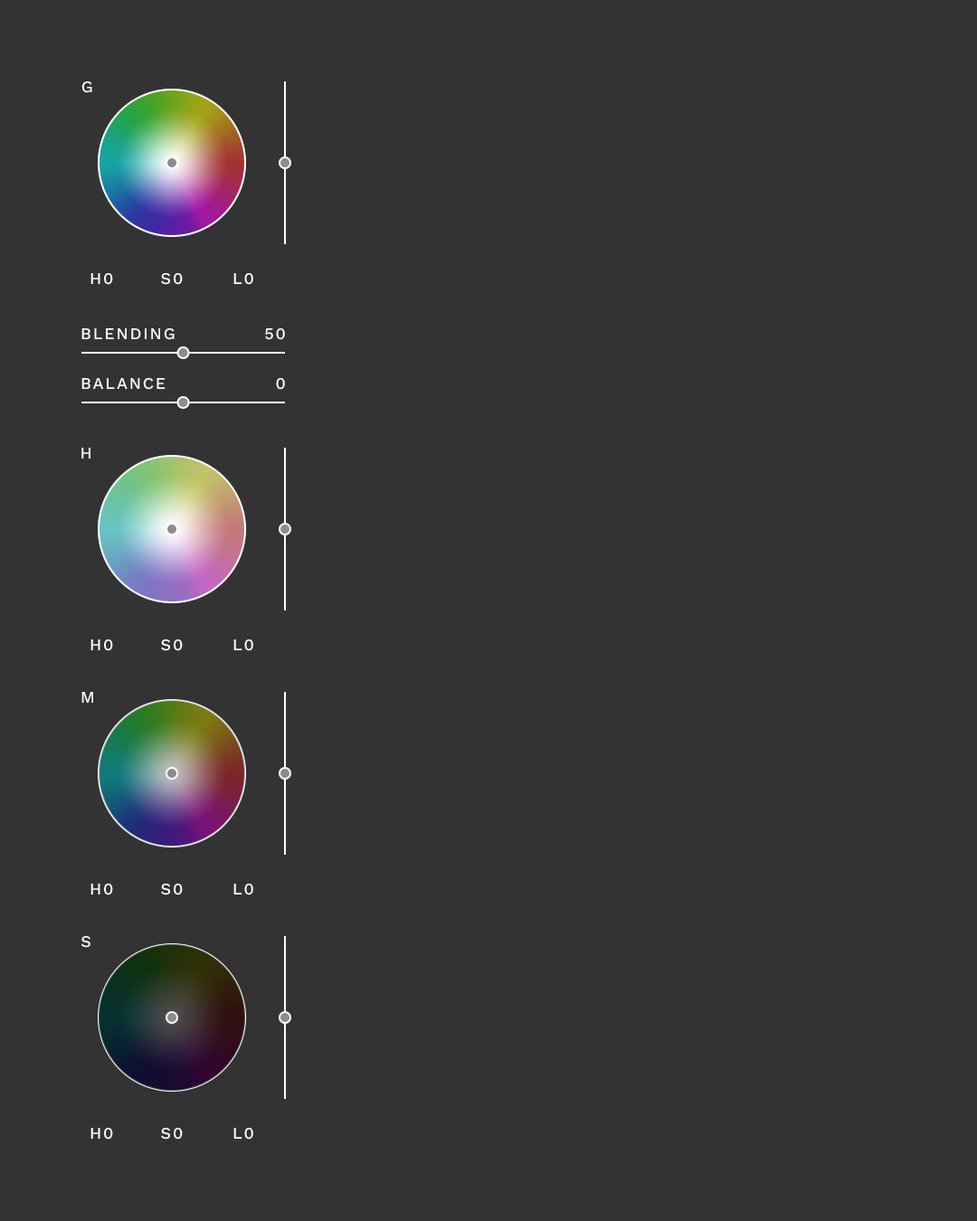
<style>
.page{position:relative;width:977px;height:1221px;background:#333333}
.page>*{position:absolute;margin:0}
.t1{font:16.3px "WorkSansRoman-Medium";letter-spacing:0.1em;color:#ffffff;text-transform:uppercase}
</style>
<div class="page">
<p class="t1" style="left:81px;top:81px;width:11px;height:12px">G</p>
<p class="t1" style="left:90px;top:273px;width:23px;height:12px">H0</p>
<p class="t1" style="left:161px;top:273px;width:22px;height:12px">S0</p>
<p class="t1" style="left:233px;top:273px;width:20px;height:12px">L0</p>
<p class="t1" style="left:81px;top:328px;width:94px;height:12px">Blending</p>
<p class="t1" style="left:265px;top:328px;width:20px;height:12px">50</p>
<p class="t1" style="left:81px;top:378px;width:84px;height:12px">Balance</p>
<p class="t1" style="left:276px;top:378px;width:9px;height:12px">0</p>
<p class="t1" style="left:81px;top:448px;width:9px;height:11px">H</p>
<p class="t1" style="left:90px;top:639px;width:23px;height:12px">H0</p>
<p class="t1" style="left:161px;top:639px;width:22px;height:12px">S0</p>
<p class="t1" style="left:233px;top:639px;width:20px;height:12px">L0</p>
<p class="t1" style="left:81px;top:692px;width:12px;height:11px">M</p>
<p class="t1" style="left:90px;top:884px;width:23px;height:11px">H0</p>
<p class="t1" style="left:161px;top:884px;width:22px;height:11px">S0</p>
<p class="t1" style="left:233px;top:884px;width:20px;height:11px">L0</p>
<p class="t1" style="left:81px;top:936px;width:9px;height:12px">S</p>
<p class="t1" style="left:90px;top:1128px;width:23px;height:11px">H0</p>
<p class="t1" style="left:161px;top:1128px;width:22px;height:11px">S0</p>
<p class="t1" style="left:233px;top:1128px;width:20px;height:11px">L0</p>
</div>
